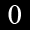
<style>
.page{position:relative;width:30px;height:30px;background:#000000}
.page>*{position:absolute;margin:0}
.t1{font:29.5px "TimesNewRomanPSMT";letter-spacing:0.08em;color:#ffffff}
</style>
<div class="page">
<p class="t1" style="left:8px;top:5px;width:13px;height:19px">0</p>
</div>
